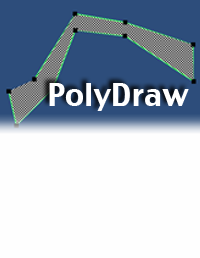
<style>
.page{position:relative;width:200px;height:258px;background:#fefefe}
.page>*{position:absolute;margin:0}
.t1{font:29.8px "CharcoalCY";color:#ffffff}
</style>
<div class="page">
<p class="t1" style="left:49px;top:83px;width:140px;height:28px">PolyDraw</p>
</div>
